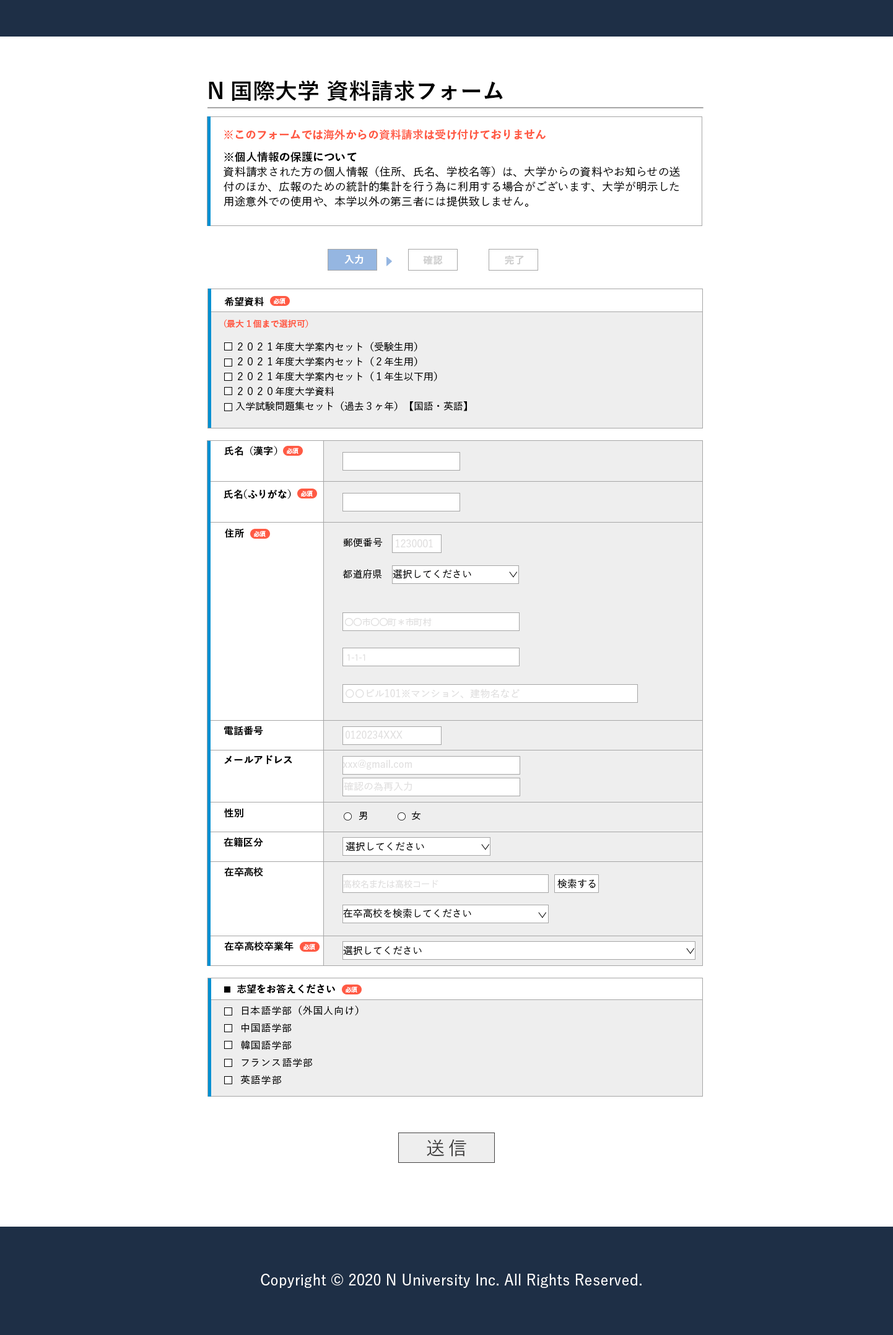
<style>
.page{position:relative;width:893px;height:1335px;background:#ffffff}
.page>*{position:absolute;margin:0}
.t1{font:22.3px "YuGo-Bold";color:#010101}
.t2{font:11.1px "YuGo-Bold";color:#ff5a44}
.t3{font:11.1px/14.9px "YuGo-Medium";color:#000000}
.t4{font:11.1px/14.9px "YuGo-Bold";color:#000000}
.t5{font:9.9px "YuGo-Bold";color:#ffffff}
.t6{font:9.9px "YuGo-Bold";color:#cdcdcd}
.t7{font:9.9px "YuGo-Bold";color:#000000}
.t8{font:6.2px "YuGo-Bold";color:#ffffff}
.t9{font:8.7px "YuGo-Bold";color:#ff5a44}
.t10{font:9.9px/14.9px "YuGo-Medium";color:#000000}
.t11{font:9.9px "YuGo-Medium";color:#000000}
.t12{font:9.9px "YuGo-Medium";color:#e0dfdf}
.t13{font:9.9px "YuGo-Medium";color:#000001}
.t14{font:8.7px "KozGoPr6N-Regular";color:#e0dfdf}
.t15{font:9.9px/17.3px "YuGo-Medium";letter-spacing:0.05em;color:#000000}
.t16{font:18.6px "YuGo-Medium";letter-spacing:0.2em;color:#414040}
.t17{font:14.9px "YuGo-Medium";letter-spacing:0.005em;color:#ffffff}
</style>
<div class="page">
<p class="t1" style="left:209px;top:80px;width:294px;height:21px">N 国際大学 資料請求フォーム</p>
<p class="t2" style="left:224px;top:129px;width:322px;height:11px">※このフォームでは海外からの資料請求は受け付けておりません</p>
<p class="t3" style="left:224px;top:151px;width:456px;height:56px"><span class="t4">※個人情報の保護について<br></span>資料請求された方の個人情報（住所、氏名、学校名等）は、大学からの資料やお知らせの送<br>付のほか、広報のための統計的集計を行う為に利用する場合がございます、大学が明示した<br>用途意外での使用や、本学以外の第三者には提供致しません。</p>
<p class="t5" style="left:344px;top:255px;width:20px;height:9px">入力</p>
<p class="t6" style="left:423px;top:255px;width:20px;height:10px">確認</p>
<p class="t6" style="left:505px;top:255px;width:19px;height:10px">完了</p>
<p class="t7" style="left:224px;top:297px;width:40px;height:10px">希望資料</p>
<p class="t8" style="left:274px;top:298px;width:12px;height:6px">必須</p>
<p class="t9" style="left:224px;top:319px;width:84px;height:9px">（最大１個まで選択可）</p>
<p class="t10" style="left:236px;top:342px;width:231px;height:69px">２０２１年度大学案内セット（受験生用）<br>２０２１年度大学案内セット（２年生用）<br>２０２１年度大学案内セット（１年生以下用）<br>２０２０年度大学資料<br>入学試験問題集セット（過去３ヶ年）【国語・英語】</p>
<p class="t7" style="left:224px;top:446px;width:53px;height:10px">氏名（漢字）</p>
<p class="t8" style="left:287px;top:448px;width:12px;height:6px">必須</p>
<p class="t7" style="left:224px;top:489px;width:67px;height:10px">氏名（ふりがな）</p>
<p class="t8" style="left:301px;top:490px;width:12px;height:7px">必須</p>
<p class="t7" style="left:225px;top:528px;width:19px;height:10px">住所</p>
<p class="t8" style="left:254px;top:531px;width:12px;height:6px">必須</p>
<p class="t11" style="left:343px;top:538px;width:40px;height:9px">郵便番号</p>
<p class="t12" style="left:396px;top:539px;width:37px;height:8px">1230001</p>
<p class="t11" style="left:342px;top:569px;width:40px;height:10px">都道府県</p>
<p class="t13" style="left:393px;top:570px;width:78px;height:9px">選択してください</p>
<p class="t14" style="left:344px;top:618px;width:88px;height:9px">〇〇市〇〇町＊市町村</p>
<p class="t14" style="left:347px;top:654px;width:18px;height:7px">1-1-1</p>
<p class="t12" style="left:346px;top:689px;width:174px;height:10px">〇〇ビル101※マンション、建物名など</p>
<p class="t7" style="left:224px;top:726px;width:39px;height:10px">電話番号</p>
<p class="t12" style="left:346px;top:731px;width:57px;height:8px">0120234XXX</p>
<p class="t7" style="left:224px;top:755px;width:68px;height:9px">メールアドレス</p>
<p class="t12" style="left:343px;top:760px;width:69px;height:10px">xxx@gmail.com</p>
<p class="t12" style="left:344px;top:782px;width:68px;height:9px">確認の為再入力</p>
<p class="t7" style="left:224px;top:808px;width:19px;height:10px">性別</p>
<p class="t11" style="left:359px;top:812px;width:8px;height:9px">男</p>
<p class="t11" style="left:412px;top:811px;width:9px;height:10px">女</p>
<p class="t7" style="left:224px;top:837px;width:39px;height:10px">在籍区分</p>
<p class="t11" style="left:346px;top:842px;width:78px;height:10px">選択してください</p>
<p class="t7" style="left:224px;top:867px;width:39px;height:10px">在卒高校</p>
<p class="t14" style="left:343px;top:880px;width:95px;height:9px">高校名または高校コード</p>
<p class="t11" style="left:557px;top:879px;width:39px;height:10px">検索する</p>
<p class="t11" style="left:343px;top:909px;width:128px;height:9px">在卒高校を検索してください</p>
<p class="t7" style="left:224px;top:941px;width:70px;height:10px">在卒高校卒業年</p>
<p class="t8" style="left:303px;top:944px;width:12px;height:6px">必須</p>
<p class="t11" style="left:343px;top:946px;width:79px;height:10px">選択してください</p>
<p class="t7" style="left:237px;top:984px;width:98px;height:10px">志望をお答えください</p>
<p class="t8" style="left:346px;top:987px;width:11px;height:6px">必須</p>
<p class="t15" style="left:240px;top:1006px;width:119px;height:79px">日本語学部（外国人向け）<br>中国語学部<br>韓国語学部<br>フランス語学部<br>英語学部</p>
<p class="t16" style="left:427px;top:1140px;width:39px;height:17px">送信</p>
<p class="t17" style="left:261px;top:1274px;width:381px;height:14px">Copyright © 2020 N University Inc. All Rights Reserved.</p>
</div>
